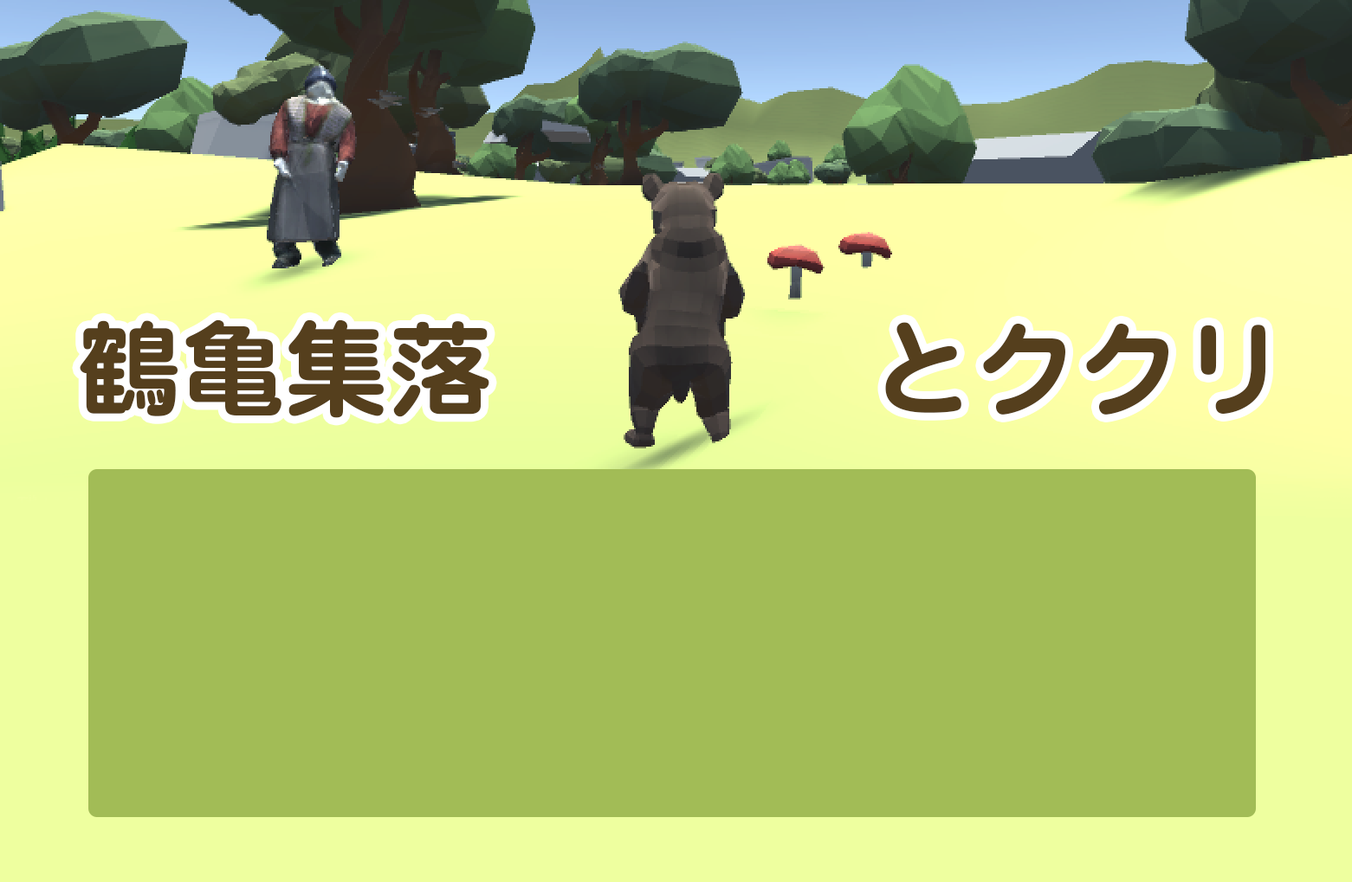
<style>
.page{position:relative;width:1352px;height:882px;background:#a2bc56}
.page>*{position:absolute;margin:0}
.t1{font:103.4px "Jun501Pro-Bold";color:#553f1d}
</style>
<div class="page">
<p class="t1" style="left:80px;top:319px;width:1186px;height:99px">鶴亀集落     　　とククリ</p>
</div>
